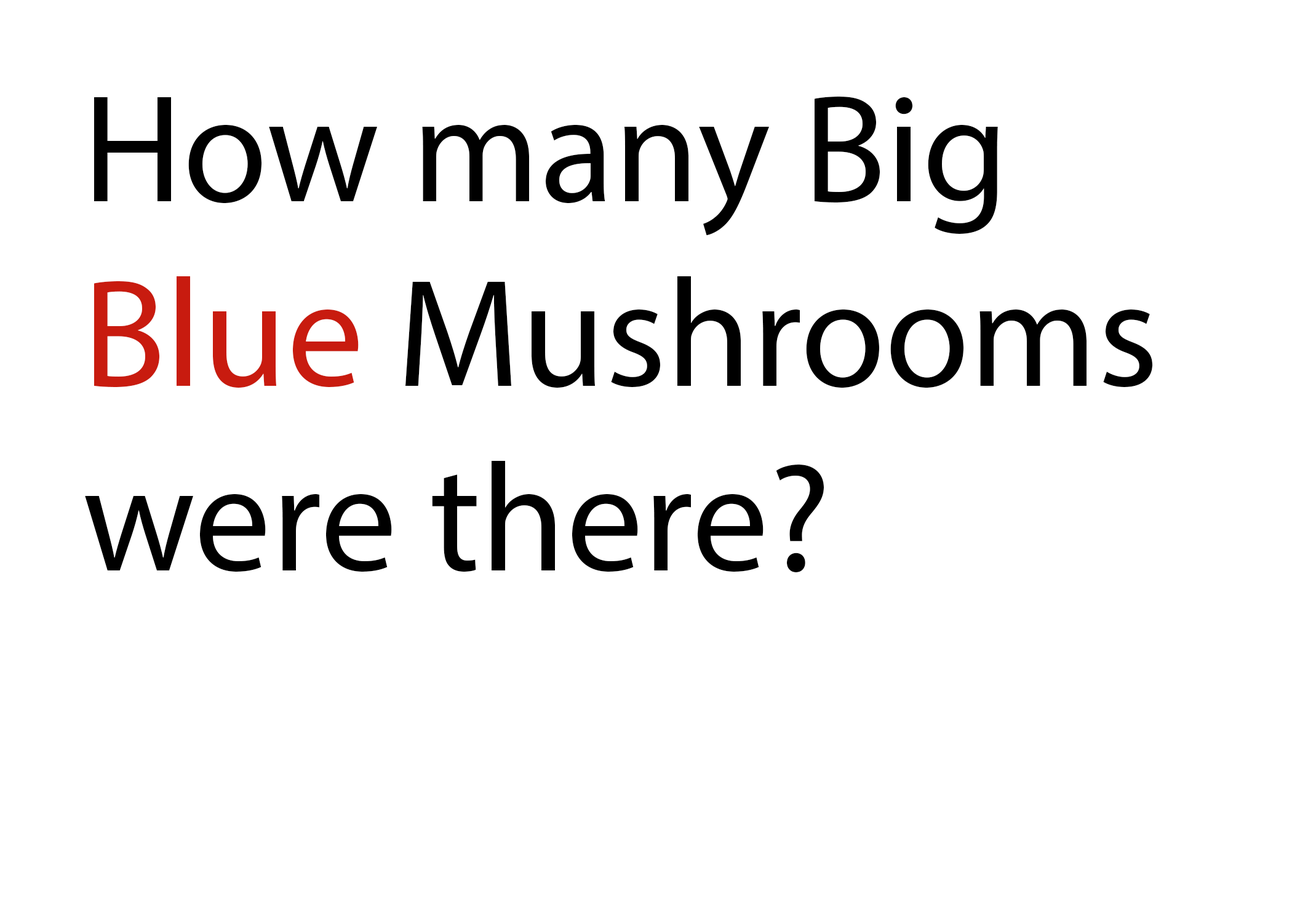
<style>
.page{position:relative;width:1292px;height:923px;background:#ffffff}
.page>*{position:absolute;margin:0}
.t1{font:153.8px "MyriadPro-Regular";color:#000000}
.t2{font:153.8px "MyriadPro-Regular";color:#c81b0f}
</style>
<div class="page">
<p class="t1" style="left:85px;top:97px;width:1067px;height:475px">How many Big <span class="t2">Blue</span> Mushrooms were there?</p>
</div>
